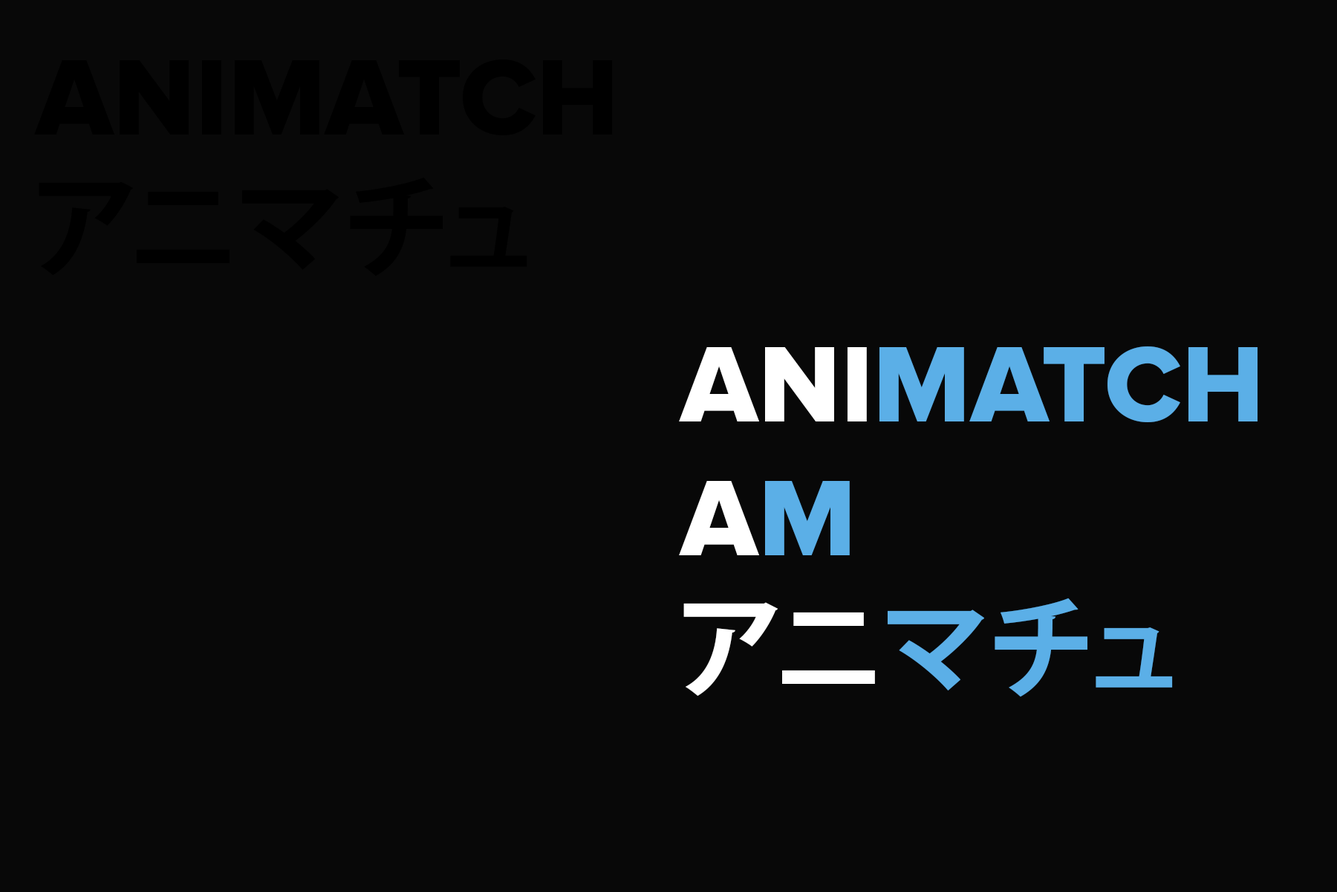
<style>
.page{position:relative;width:1337px;height:892px;background:#080808}
.page>*{position:absolute;margin:0}
.t1{font:111.5px "ProximaNova-Extrabld";color:#000000}
.t2{font:111.5px "KozGoPr6N-Bold";color:#000000}
.t3{font:111.5px "ProximaNova-Extrabld";color:#5bafe7}
.t4{font:111.5px "ProximaNova-Extrabld";color:#ffffff}
.t5{font:111.5px "KozGoPr6N-Bold";color:#ffffff}
.t6{font:111.5px "KozGoPr6N-Bold";color:#5bafe7}
</style>
<div class="page">
<p class="t1" style="left:34px;top:59px;width:578px;height:217px">ANIMATCH<br><span class="t2">アニマチュ</span></p>
<p class="t3" style="left:679px;top:346px;width:579px;height:351px"><span class="t4">ANI</span>MATCH<br><span class="t4">A</span>M<br><span class="t5">アニ</span><span class="t6">マチュ</span></p>
</div>
